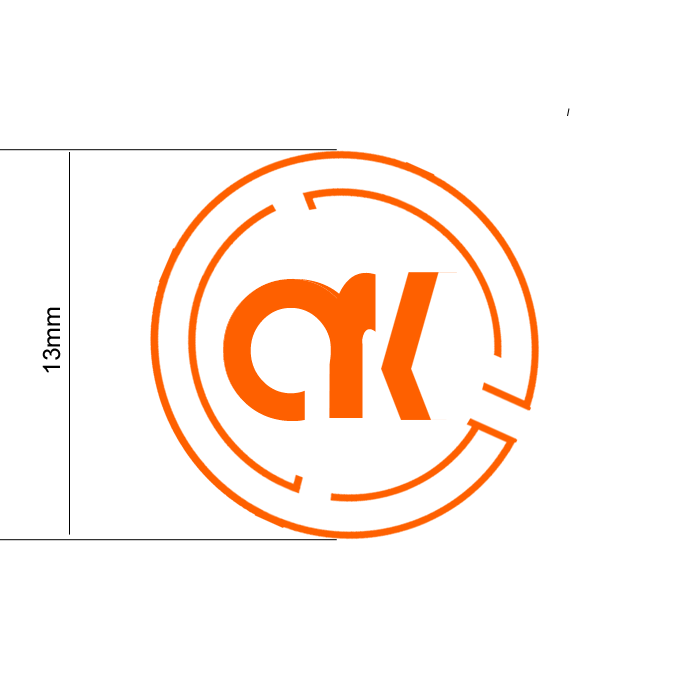
<style>
.page{position:relative;width:690px;height:690px;background:#ffffff}
.page>*{position:absolute;margin:0}
.t1{font:291.7px "Bauhaus93";color:#fe6000;scale:0.57 1}
.t2{font:24.1px "ArialMT";color:#000000;scale:1.03 1}
</style>
<div class="page">
<p class="t1" style="left:330px;top:272px;width:46px;height:146px">r</p>
<p class="t2" style="left:42px;top:307px;width:19px;height:66px;rotate:-90deg">13mm</p>
</div>
